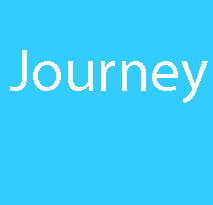
<style>
.page{position:relative;width:213px;height:205px;background:#33ccff}
.page>*{position:absolute;margin:0}
.t1{font:60px "MyriadPro-Regular";color:#ffffff}
.t2{font:48px "MyriadPro-Regular";color:#ffffff}
</style>
<div class="page">
<p class="t1" style="left:9px;top:50px;width:199px;height:53px"><span class="t2">      </span>   Journey</p>
</div>
